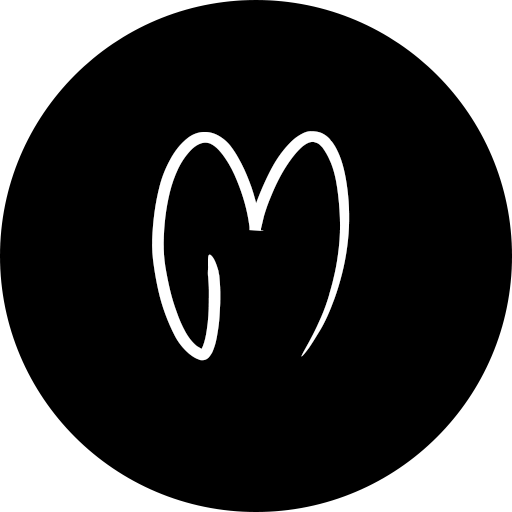
<style>
.page{position:relative;width:512px;height:512px;background:#000000}
.page>*{position:absolute;margin:0}
.t1{font:300px "PWCurvyregularscript";color:#ffffff}
</style>
<div class="page">
<p class="t1" style="left:152px;top:131px;width:198px;height:230px">M</p>
</div>
